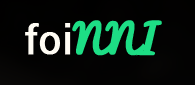
<style>
.page{position:relative;width:195px;height:85px}
.page>*{position:absolute;margin:0}
.t1{font:40px "Roboto-Regular";color:#fffcf4;font-weight:bold}
.t2{font:40px "Pacifico-Regular";color:#1dde85;font-weight:bold}
</style>
<div class="page">
<p class="t1" style="left:25px;top:20px;width:137px;height:36px">foi<span class="t2">NNI</span></p>
</div>
